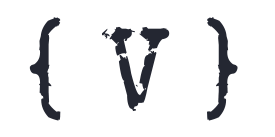
<style>
.page{position:relative;width:275px;height:137px;background:#ffffff}
.page>*{position:absolute;margin:0}
.t1{font:120px "VeteranTypewriter";color:#242732}
</style>
<div class="page">
<p class="t1" style="left:29px;top:17px;width:209px;height:104px">{ V }</p>
</div>
